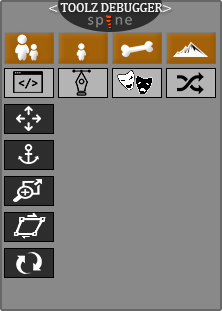
<style>
.page{position:relative;width:222px;height:311px;background:#898989}
.page>*{position:absolute;margin:0}
.t1{font:12.6px "CambriaMath";color:#efefef;text-transform:uppercase}
</style>
<div class="page">
<p class="t1" style="left:49px;top:3px;width:123px;height:9px">&lt; toolz debugger&gt;</p>
</div>
